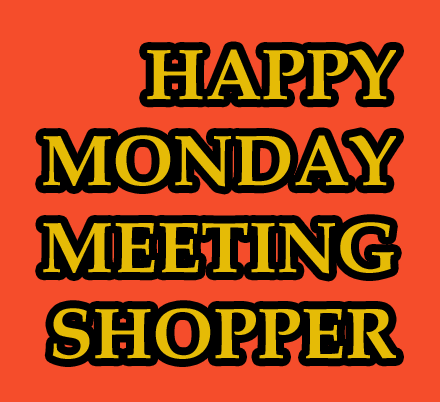
<style>
.page{position:relative;width:440px;height:402px;background:#f54d2b}
.page>*{position:absolute;margin:0}
.t1{font:72px "BookAntiqua-Bold";color:#e5bb06}
</style>
<div class="page">
<p class="t1" style="left:43px;top:49px;width:353px;height:310px;text-align:right">HAPPY<br>MONDAY<br>MEETING<br>SHOPPER</p>
</div>
